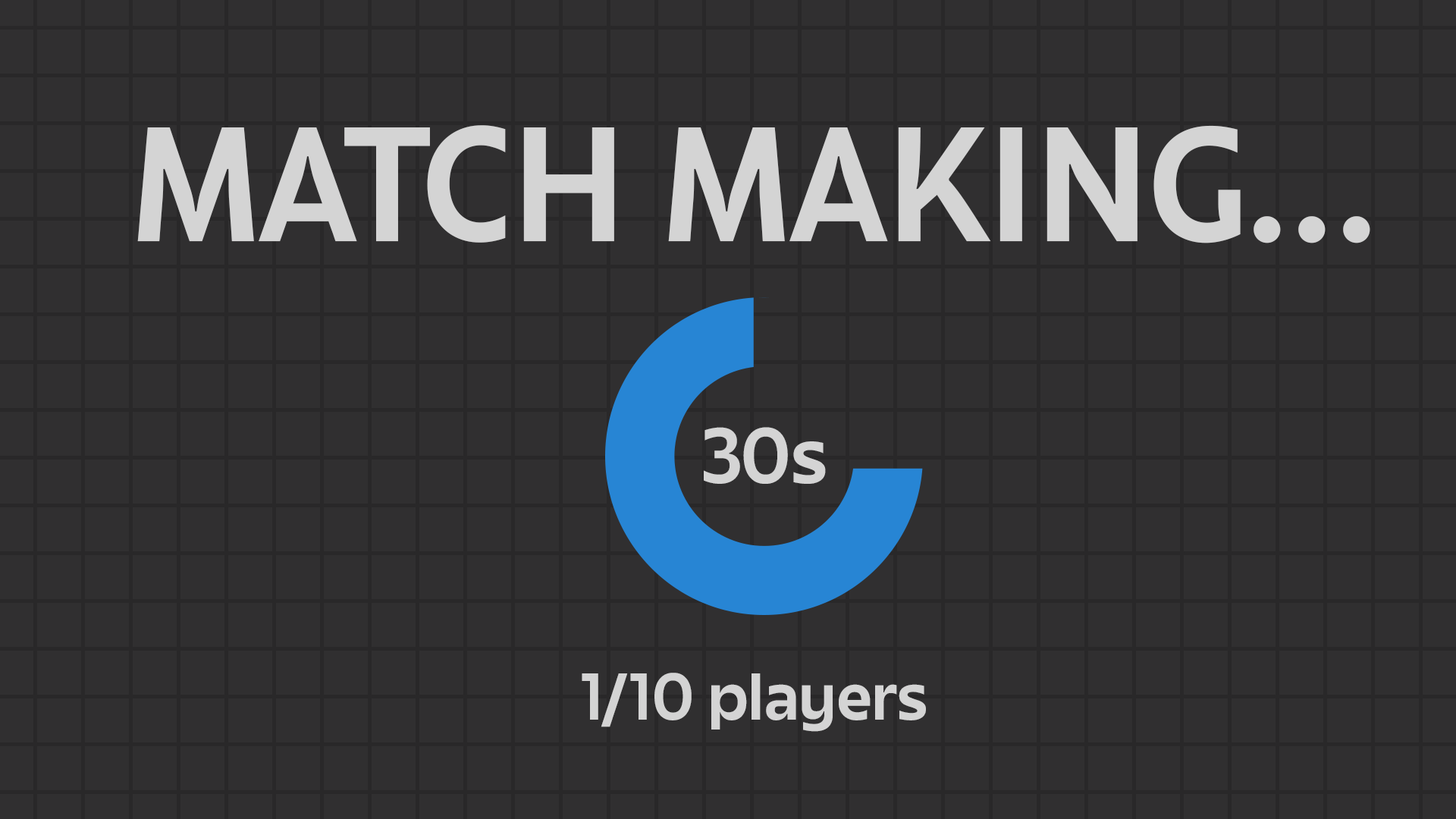
<style>
.page{position:relative;width:1456px;height:819px;background:#302f30}
.page>*{position:absolute;margin:0}
.t1{font:142.2px "JuneExptVariable-Active";color:#d4d4d4}
.t2{font:68.7px "JuneExptVariable-Active";color:#d4d4d4}
.t3{font:57.8px "JuneExptVariable-Active";color:#d4d4d4}
</style>
<div class="page">
<p class="t1" style="left:137px;top:125px;width:1233px;height:118px">MATCH MAKING...</p>
<p class="t2" style="left:704px;top:427px;width:122px;height:57px">30s</p>
<p class="t3" style="left:582px;top:673px;width:344px;height:59px">1/10 players</p>
</div>
